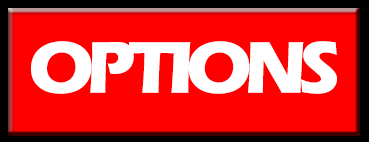
<style>
.page{position:relative;width:369px;height:142px;background:#ff0000}
.page>*{position:absolute;margin:0}
.t1{font:130px "ErasITC-Bold";letter-spacing:-0.1em;color:#ffffff}
.t2{font:48px "ErasITC-Bold";letter-spacing:-0.1em;color:#ffffff}
</style>
<div class="page">
<p class="t1" style="left:31px;top:41px;width:306px;height:53px"><span class="t2"><br><br><br><br><br><br><br><br><br><br><br></span><br><br><br><br><br>OPTIONS</p>
</div>
